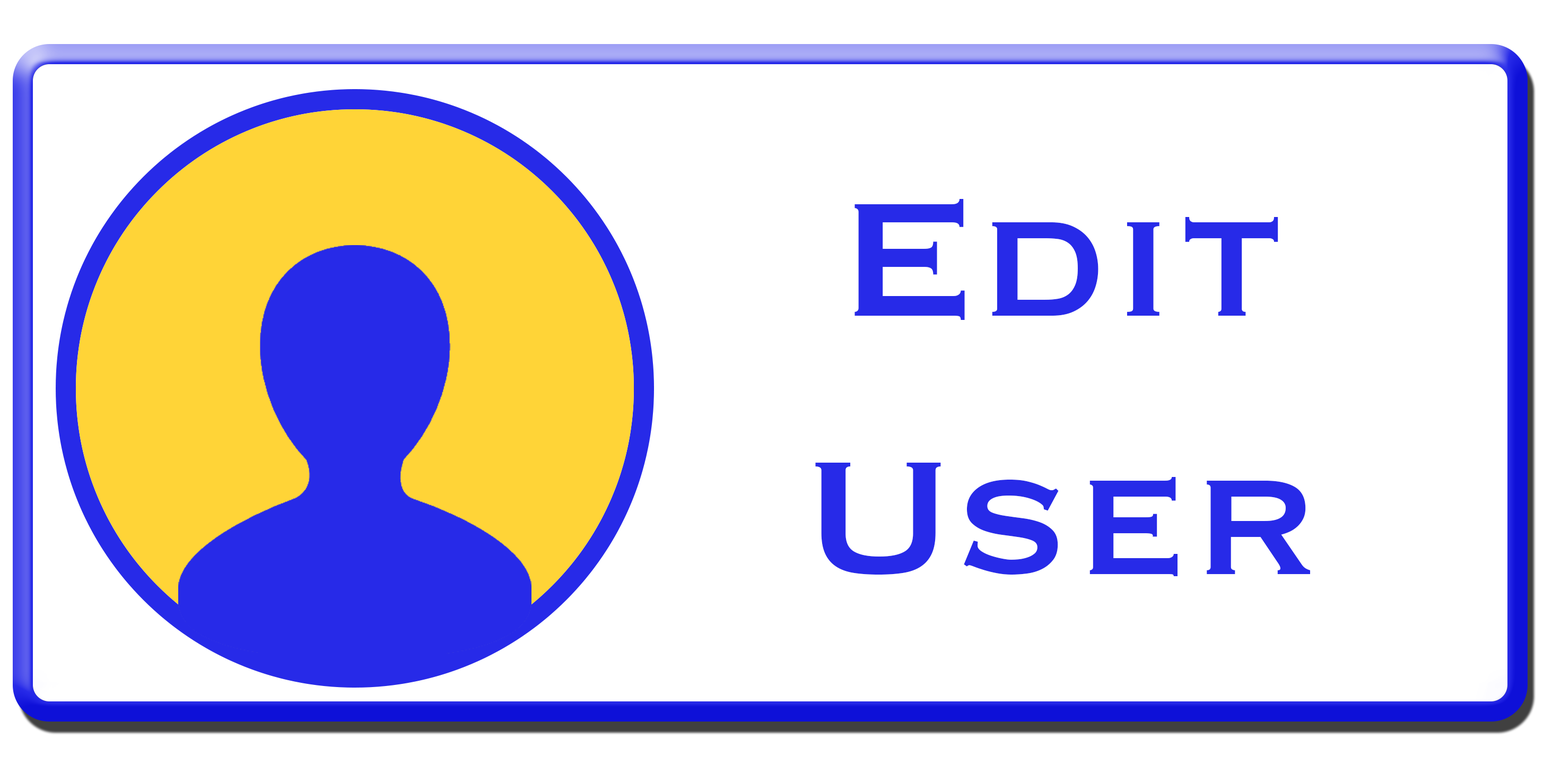
<style>
.page{position:relative;width:1561px;height:764px;background:#ffffff}
.page>*{position:absolute;margin:0}
.t1{font:212.2px "Copperplate";color:#272ae8}
</style>
<div class="page">
<p class="t1" style="left:815px;top:199px;width:495px;height:377px;text-align:center">Edit <br>User</p>
</div>
